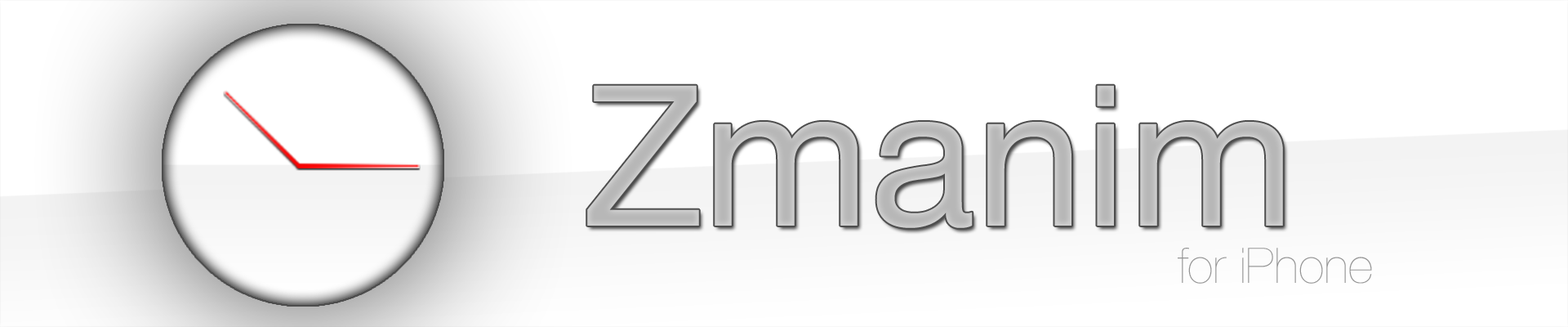
<style>
.page{position:relative;width:1568px;height:327px;background:#ffffff}
.page>*{position:absolute;margin:0}
.t1{font:196px "HelveticaNeue";color:#bdbdbd}
.t2{font:49px "HelveticaNeue-UltraLight";color:#949494}
</style>
<div class="page">
<p class="t1" style="left:587px;top:85px;width:696px;height:143px">Zmanim</p>
<p class="t2" style="left:1178px;top:247px;width:194px;height:36px">for iPhone</p>
</div>
